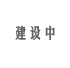
<style>
.page{position:relative;width:70px;height:68px;background:#ffffff}
.page>*{position:absolute;margin:0}
.t1{font:14px "FZYTK--GBK1-0";color:#696464;font-weight:bold}
</style>
<div class="page">
<p class="t1" style="left:15px;top:25px;width:40px;height:15px">建设中</p>
</div>
